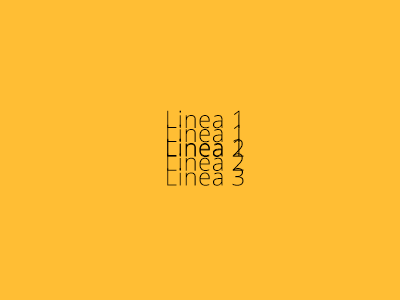
<style>
.page{position:relative;width:400px;height:300px;background:#ffbe34}
.page>*{position:absolute;margin:0}
.t1{font:24px "OpenSans-Light";letter-spacing:0.02em;color:#000000}
</style>
<div class="page">
<p class="t1" style="left:167px;top:110px;width:77px;height:76px;text-align:center">Linea 1<br>Linea 2<br>Linea 3</p>
<p class="t1" style="left:167px;top:124px;width:77px;height:47px;text-align:center">Linea 1<br>Linea 2</p>
<p class="t1" style="left:167px;top:138px;width:73px;height:19px">Linea 1</p>
</div>
